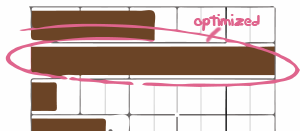
<style>
.page{position:relative;width:300px;height:131px;background:#fefefe}
.page>*{position:absolute;margin:0}
.t1{font:12px "TRENDY";color:#df648d}
</style>
<div class="page">
<p class="t1" style="left:193px;top:14px;width:67px;height:17px">optimized</p>
</div>
